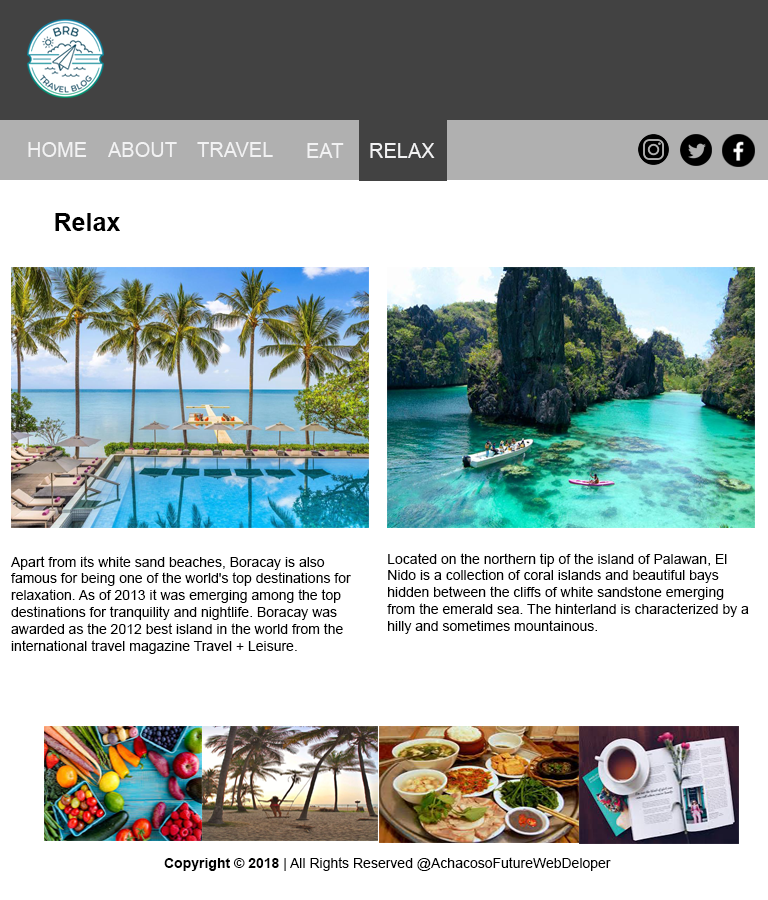
<style>
.page{position:relative;width:768px;height:900px;background:#ffffff}
.page>*{position:absolute;margin:0}
.t1{font:20px "ArialMT";color:#f2f2f3}
.t2{font:25px "Arial-BoldMT";color:#000000}
.t3{font:14px "ArialMT";color:#000000}
.t4{font:14px "Arial-BoldMT";color:#000000}
</style>
<div class="page">
<p class="t1" style="left:28px;top:142px;width:59px;height:15px">HOME</p>
<p class="t1" style="left:108px;top:142px;width:69px;height:15px">ABOUT</p>
<p class="t1" style="left:197px;top:142px;width:76px;height:15px">TRAVEL</p>
<p class="t1" style="left:307px;top:143px;width:37px;height:15px">EAT</p>
<p class="t1" style="left:370px;top:143px;width:65px;height:15px">RELAX</p>
<p class="t2" style="left:55px;top:213px;width:65px;height:18px">Relax</p>
<p class="t3" style="left:11px;top:556px;width:340px;height:98px">Apart from its white sand beaches, Boracay is also famous for being one of the world's top destinations for relaxation. As of 2013 it was emerging among the top destinations for tranquility and nightlife. Boracay was awarded as the 2012 best island in the world from the international travel magazine Travel + Leisure.</p>
<p class="t3" style="left:387px;top:553px;width:362px;height:81px">Located on the northern tip of the island of Palawan, El Nido is a collection of coral islands and beautiful bays hidden between the cliffs of white sandstone emerging from the emerald sea. The hinterland is characterized by a hilly and sometimes mountainous.</p>
<p class="t3" style="left:164px;top:857px;width:447px;height:14px"><span class="t4">Copyright © 2018 </span>| All Rights Reserved @AchacosoFutureWebDeloper</p>
</div>
